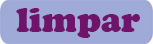
<style>
.page{position:relative;width:153px;height:44px;background:#9faad7}
.page>*{position:absolute;margin:0}
.t1{font:36px "CooperBlack";color:#70146b}
</style>
<div class="page">
<p class="t1" style="left:16px;top:8px;width:124px;height:30px">limpar</p>
</div>
